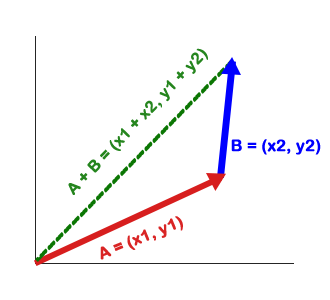
<style>
.page{position:relative;width:330px;height:300px;background:#ffffff}
.page>*{position:absolute;margin:0}
.t1{font:16px "ArialRoundedMTBold";color:#25851e;font-weight:bold}
.t2{font:16px "ArialRoundedMTBold";color:#0000ff;font-weight:bold}
.t3{font:16px "ArialRoundedMTBold";color:#d92525;font-weight:bold}
</style>
<div class="page">
<p class="t1" style="left:68px;top:48px;width:140px;height:147px;rotate:-46deg">A + B = (x1 + x2, y1 + y2)</p>
<p class="t2" style="left:231px;top:139px;width:90px;height:16px">B = (x2, y2)</p>
<p class="t3" style="left:100px;top:216px;width:83px;height:44px;rotate:-22deg">A = (x1, y1)</p>
</div>
